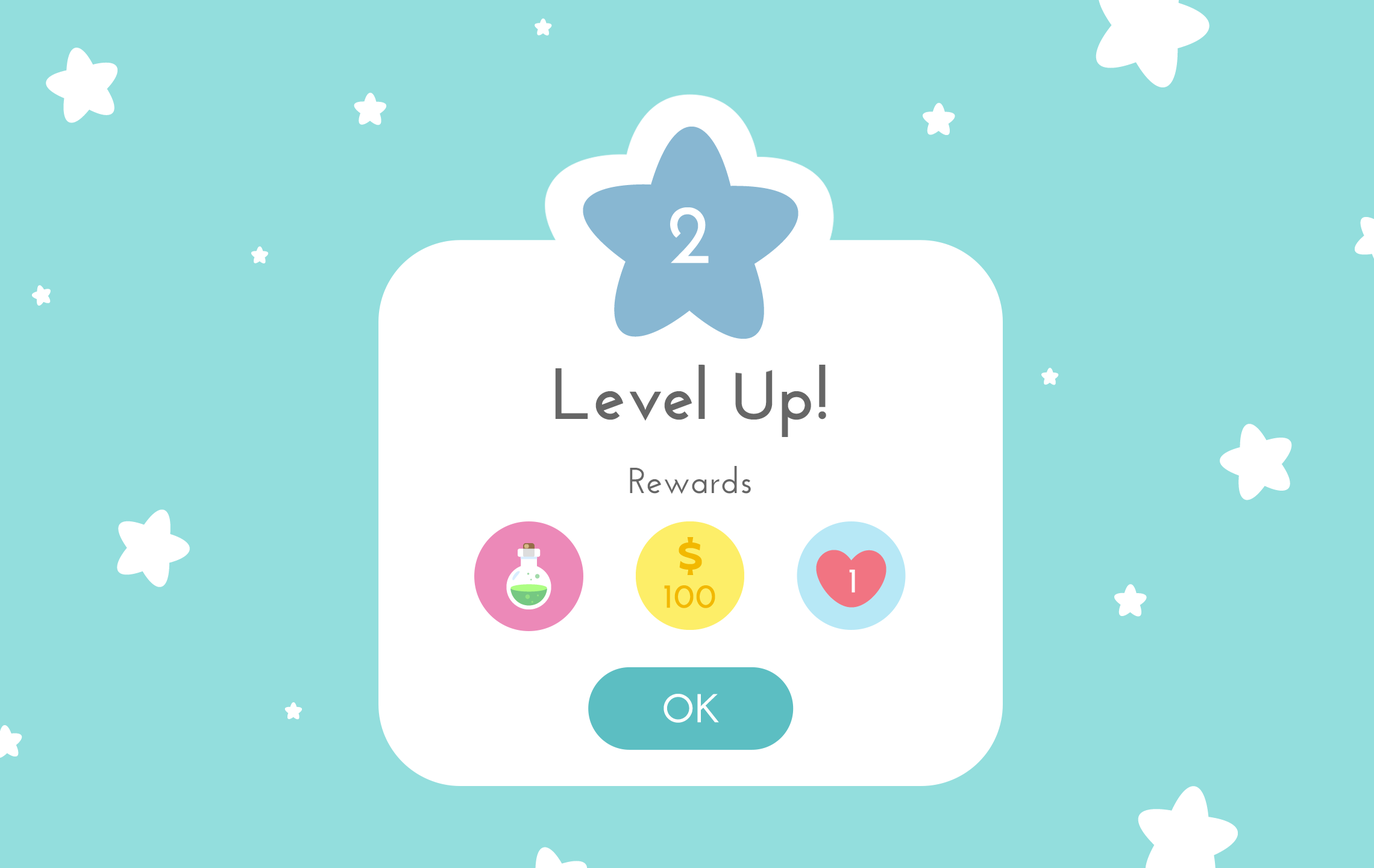
<style>
.page{position:relative;width:1374px;height:868px;background:#93dedd}
.page>*{position:absolute;margin:0}
.t1{font:84.4px "JosefinSans-Bold";color:#ffffff}
.t2{font:72.3px "JosefinSans-Bold";color:#666666}
.t3{font:36.2px "JosefinSans-SemiBold";color:#666666}
.t4{font:35.1px "JosefinSans-Bold";color:#ffffff}
.t5{font:33.7px "JosefinSans-Bold";color:#f2b800;font-weight:bold}
.t6{font:40.3px "JosefinSans-Bold";color:#ffffff}
</style>
<div class="page">
<p class="t1" style="left:670px;top:207px;width:39px;height:56px">2</p>
<p class="t2" style="left:555px;top:365px;width:271px;height:72px">Level Up!</p>
<p class="t3" style="left:630px;top:466px;width:121px;height:28px">Rewards</p>
<p class="t4" style="left:849px;top:570px;width:6px;height:22px">1</p>
<p class="t5" style="left:664px;top:585px;width:51px;height:23px">100</p>
<p class="t6" style="left:664px;top:694px;width:55px;height:29px">OK</p>
</div>
